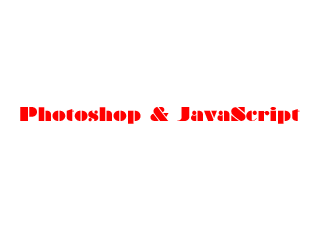
<style>
.page{position:relative;width:320px;height:240px;background:#ffffff}
.page>*{position:absolute;margin:0}
.t1{font:18px "Braggadocio";color:#ff0000}
</style>
<div class="page">
<p class="t1" style="left:20px;top:107px;width:280px;height:17px">Photoshop &amp; JavaScript</p>
</div>
